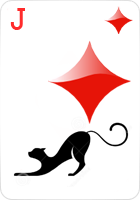
<style>
.page{position:relative;width:140px;height:200px;background:#ffffff}
.page>*{position:absolute;margin:0}
.t1{font:26px "CardCharacters";color:#ff2b2b}
</style>
<div class="page">
<p class="t1" style="left:10px;top:8px;width:15px;height:22px">J</p>
</div>
